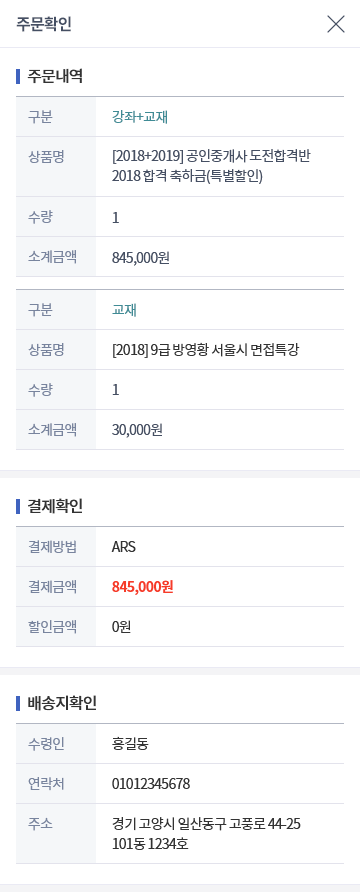
<style>
.page{position:relative;width:360px;height:892px;background:#ffffff}
.page>*{position:absolute;margin:0}
.t1{font:16px "NotoSansCJKkr-Bold";letter-spacing:-0.05em;color:#454f63}
.t2{font:16px "NotoSansCJKkr-Medium";letter-spacing:-0.05em;color:#333333}
.t3{font:14px/40px "NotoSansCJKkr-Regular";letter-spacing:-0.05em;color:#78849e}
.t4{font:14px "NotoSansCJKkr-Regular";letter-spacing:-0.05em;color:#3f8b95}
.t5{font:14px/20px "NotoSansCJKkr-Regular";letter-spacing:-0.05em;color:#454f63}
.t6{font:14px/40px "NotoSansCJKkr-Regular";letter-spacing:-0.05em;color:#454f63}
.t7{font:14px/22px "NotoSansCJKkr-Regular";letter-spacing:-0.05em;color:#333333}
.t8{font:14px/40px "NotoSansCJKkr-Regular";letter-spacing:-0.05em;color:#3f8b95}
.t9{font:14px/40px "NotoSansCJKkr-Bold";letter-spacing:-0.05em;color:#f63b28}
.t10{font:14px/40px "NotoSansCJKkr-Regular";letter-spacing:-0.05em;color:#333333}
.t11{font:14px/20px "NotoSansCJKkr-Regular";letter-spacing:-0.05em;color:#333333}
</style>
<div class="page">
<p class="t1" style="left:16px;top:16px;width:55px;height:16px">주문확인</p>
<p class="t2" style="left:27px;top:68px;width:55px;height:16px">주문내역</p>
<p class="t3" style="left:28px;top:110px;width:48px;height:154px">구분<br>상품명<br>    <br>수량<br>소계금액</p>
<p class="t4" style="left:112px;top:110px;width:55px;height:14px">강좌+교재</p>
<p class="t5" style="left:112px;top:149px;width:199px;height:35px">[2018+2019] 공인중개사 도전합격반<br>2018 합격 축하금(특별할인)</p>
<p class="t6" style="left:112px;top:212px;width:57px;height:54px">1<br>845,000원</p>
<p class="t3" style="left:28px;top:303px;width:48px;height:134px">구분<br>상품명<br>수량<br>소계금액</p>
<p class="t7" style="left:112px;top:303px;width:188px;height:135px"><span class="t8">교재<br></span>[2018] 9급 방영황 서울시 면접특강<br><span class="t6">1<br>30,000원</span></p>
<p class="t2" style="left:28px;top:498px;width:54px;height:16px">결제확인</p>
<p class="t3" style="left:28px;top:540px;width:48px;height:94px">결제방법<br>결제금액<br>할인금액</p>
<p class="t9" style="left:111px;top:541px;width:62px;height:92px"><span class="t10">ARS<br></span>845,000원<br><span class="t10">0원</span></p>
<p class="t2" style="left:28px;top:695px;width:68px;height:16px">배송지확인</p>
<p class="t3" style="left:28px;top:737px;width:36px;height:94px">수령인<br>연락처<br>주소</p>
<p class="t10" style="left:112px;top:736px;width:189px;height:114px">홍길동<br>01012345678<br>경기 고양시 일산동구 고풍로 44-25 <br><span class="t11">101동 1234호</span></p>
</div>
